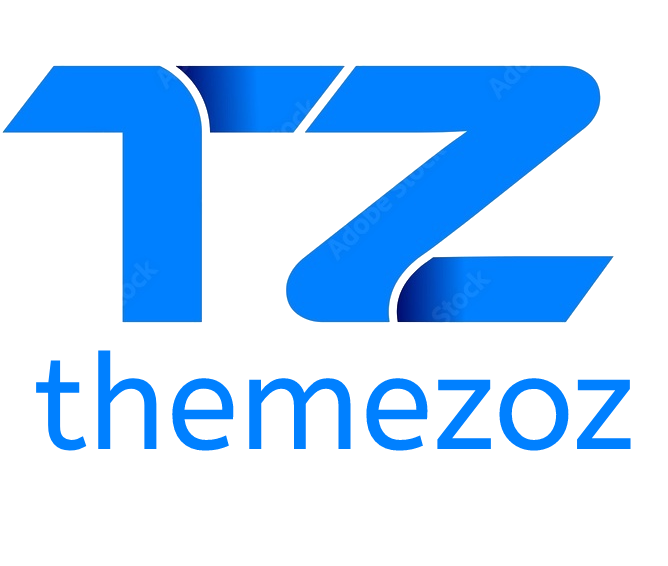
<style>
.page{position:relative;width:668px;height:566px;background:#ffffff}
.page>*{position:absolute;margin:0}
.t1{font:133px "ABeeZee-Regular";color:#0080ff}
</style>
<div class="page">
<p class="t1" style="left:36px;top:350px;width:595px;height:101px">themezoz</p>
</div>
